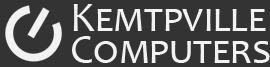
<style>
.page{position:relative;width:270px;height:67px;background:#333333}
.page>*{position:absolute;margin:0}
.t1{font:42px/32px "Candara";color:#f2f2f2;font-variant:small-caps}
</style>
<div class="page">
<p class="t1" style="left:72px;top:4px;width:198px;height:59px">Kemtpville <br>Computers</p>
</div>
